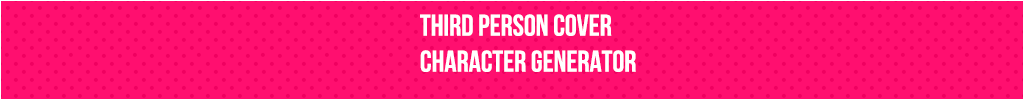
<style>
.page{position:relative;width:1024px;height:100px;background:#ff0f6f}
.page>*{position:absolute;margin:0}
.t1{font:30px "BebasNeueBold";color:#ffffff}
</style>
<div class="page">
<p class="t1" style="left:420px;top:14px;width:216px;height:58px">THIRD PERSON COVER<br>CHARACTER GENERATOR</p>
</div>
